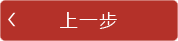
<style>
.page{position:relative;width:178px;height:41px;background:#b43129}
.page>*{position:absolute;margin:0}
.t1{font:18px "MicrosoftYaHei";letter-spacing:0.1em;color:#ffffff}
</style>
<div class="page">
<p class="t1" style="left:60px;top:12px;width:57px;height:17px">上一步</p>
</div>
